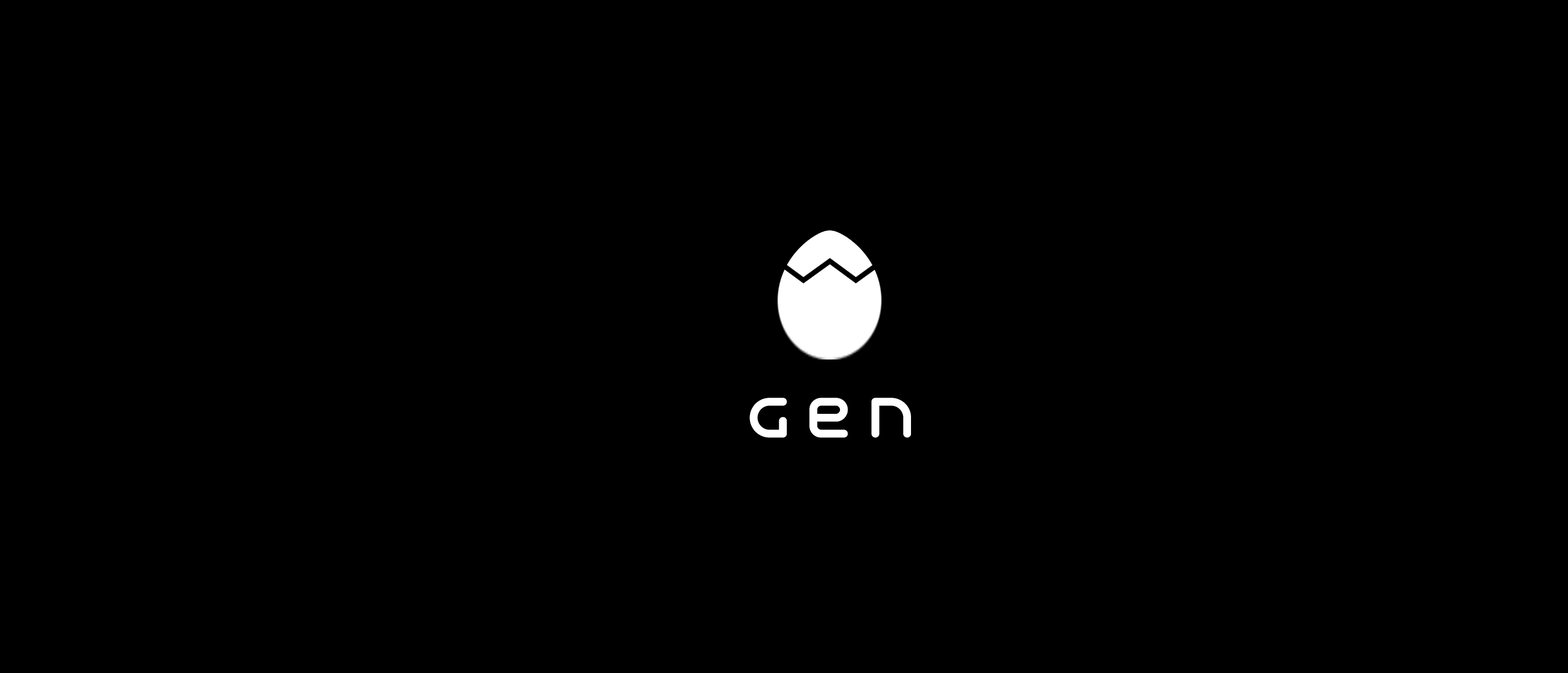
<style>
.page{position:relative;width:1568px;height:673px;background:#000000}
.page>*{position:absolute;margin:0}
.t1{font:54.4px "Syntha";letter-spacing:0.3em;color:#ffffff}
</style>
<div class="page">
<p class="t1" style="left:750px;top:398px;width:161px;height:40px">gen</p>
</div>
